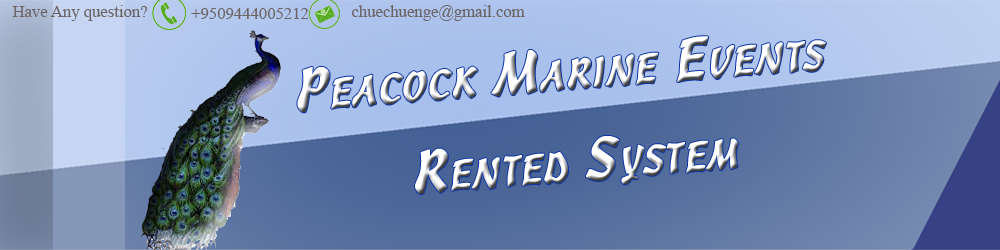
<style>
.page{position:relative;width:1000px;height:250px}
.page>*{position:absolute;margin:0}
.t1{font:16.7px "TimesNewRomanPSMT";color:#6c6363}
.t2{font:58.3px/91.7px "Freehand471BT-Regular";font-variant:small-caps;font-weight:bold}
</style>
<div class="page">
<p class="t1" style="left:12px;top:5px;width:136px;height:16px">Have Any question?</p>
<p class="t1" style="left:352px;top:5px;width:173px;height:16px">chuechuenge@gmail.com</p>
<p class="t1" style="left:191px;top:8px;width:118px;height:11px">+9509444005212</p>
<p class="t2" style="left:297px;top:36px;width:529px;height:158px;text-align:center;rotate:-5deg">Peacock Marine Events<br> Rented System</p>
</div>
